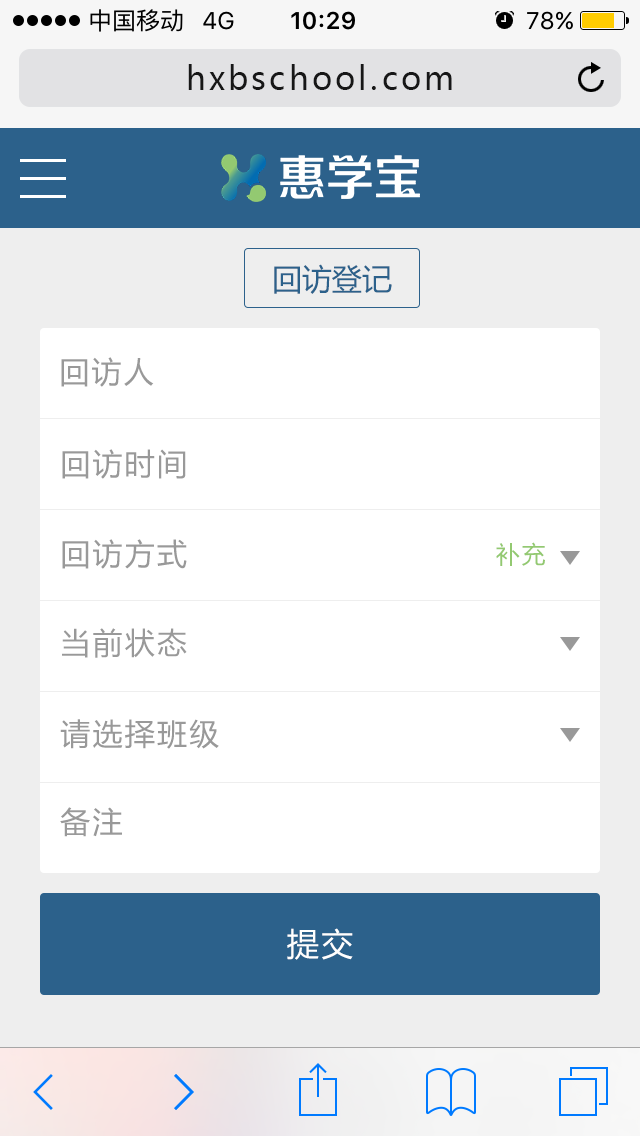
<style>
.page{position:relative;width:640px;height:1136px;background:#ffffff}
.page>*{position:absolute;margin:0}
.t1{font:32px "MicrosoftYaHei";letter-spacing:0.1em;color:#171717}
.t2{font:30px "MicrosoftYaHei";color:#2c618b}
.t3{font:30px "MicrosoftYaHei";letter-spacing:0.075em;color:#999999}
.t4{font:24px "MicrosoftYaHei";letter-spacing:0.075em;color:#93c971}
.t5{font:32px "MicrosoftYaHei";letter-spacing:0.075em;color:#ffffff}
</style>
<div class="page">
<p class="t1" style="left:188px;top:64px;width:264px;height:26px">hxbschool.com</p>
<p class="t2" style="left:274px;top:264px;width:118px;height:30px">回访登记</p>
<p class="t3" style="left:61px;top:357px;width:93px;height:30px">回访人</p>
<p class="t3" style="left:62px;top:449px;width:124px;height:30px">回访时间</p>
<p class="t3" style="left:62px;top:539px;width:125px;height:30px">回访方式</p>
<p class="t4" style="left:496px;top:542px;width:49px;height:24px">补充</p>
<p class="t3" style="left:62px;top:628px;width:125px;height:30px">当前状态</p>
<p class="t3" style="left:60px;top:719px;width:159px;height:30px">请选择班级</p>
<p class="t3" style="left:60px;top:807px;width:62px;height:30px">备注</p>
<p class="t5" style="left:287px;top:928px;width:66px;height:32px">提交</p>
</div>
